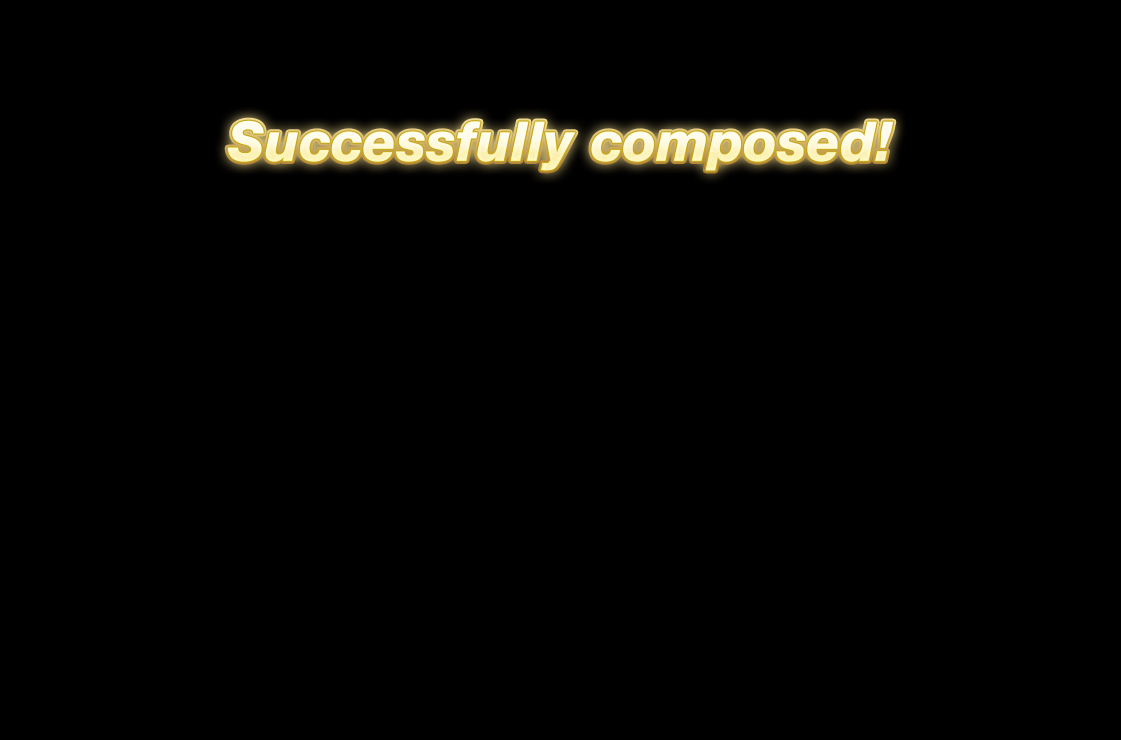
<style>
.page{position:relative;width:1121px;height:740px;background:#000000}
.page>*{position:absolute;margin:0}
.t1{font:54.8px "HelveticaNeueLT-HeavyItalic";color:#fbf1d8}
</style>
<div class="page">
<p class="t1" style="left:227px;top:120px;width:667px;height:51px">Successfully composed!</p>
<p class="t1" style="left:227px;top:120px;width:667px;height:51px">Successfully composed!</p>
</div>
